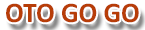
<style>
.page{position:relative;width:145px;height:30px;background:#ffffff}
.page>*{position:absolute;margin:0}
.t1{font:28.5px "Calibri-Bold";color:#b73d08;scale:0.97 1}
</style>
<div class="page">
<p class="t1" style="left:6px;top:3px;width:133px;height:20px">OTO GO GO</p>
</div>
